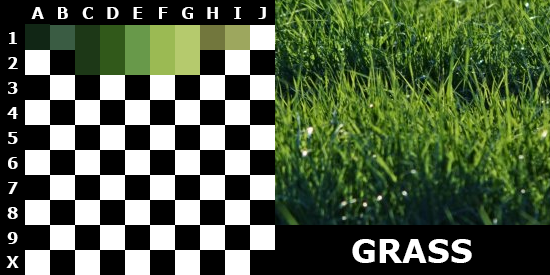
<style>
.page{position:relative;width:550px;height:275px;background:#000000}
.page>*{position:absolute;margin:0}
.t1{font:16px "Verdana-Bold";color:#ffffff}
.t2{font:32px "Verdana-Bold";color:#ffffff}
</style>
<div class="page">
<p class="t1" style="left:31px;top:7px;width:13px;height:12px">A</p>
<p class="t1" style="left:58px;top:7px;width:10px;height:12px">B</p>
<p class="t1" style="left:82px;top:7px;width:11px;height:12px">C</p>
<p class="t1" style="left:107px;top:7px;width:12px;height:12px">D</p>
<p class="t1" style="left:133px;top:7px;width:10px;height:12px">E</p>
<p class="t1" style="left:159px;top:7px;width:9px;height:12px">F</p>
<p class="t1" style="left:182px;top:7px;width:11px;height:12px">G</p>
<p class="t1" style="left:207px;top:7px;width:11px;height:12px">H</p>
<p class="t1" style="left:234px;top:7px;width:7px;height:12px">I</p>
<p class="t1" style="left:258px;top:7px;width:8px;height:12px">J</p>
<p class="t1" style="left:9px;top:32px;width:8px;height:12px">1</p>
<p class="t1" style="left:8px;top:57px;width:10px;height:12px">2</p>
<p class="t1" style="left:8px;top:82px;width:10px;height:12px">3</p>
<p class="t1" style="left:7px;top:107px;width:11px;height:12px">4</p>
<p class="t1" style="left:8px;top:132px;width:10px;height:12px">5</p>
<p class="t1" style="left:8px;top:157px;width:10px;height:12px">6</p>
<p class="t1" style="left:8px;top:182px;width:10px;height:12px">7</p>
<p class="t1" style="left:7px;top:207px;width:11px;height:12px">8</p>
<p class="t1" style="left:7px;top:232px;width:11px;height:12px">9</p>
<p class="t2" style="left:352px;top:239px;width:120px;height:24px">GRASS</p>
<p class="t1" style="left:6px;top:256px;width:13px;height:12px">X</p>
</div>
